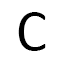
<style>
.page{position:relative;width:64px;height:64px;background:#ffffff}
.page>*{position:absolute;margin:0}
.t1{font:58.3px "Calibri";color:#000000}
</style>
<div class="page">
<p class="t1" style="left:18px;top:12px;width:28px;height:39px">С</p>
</div>
